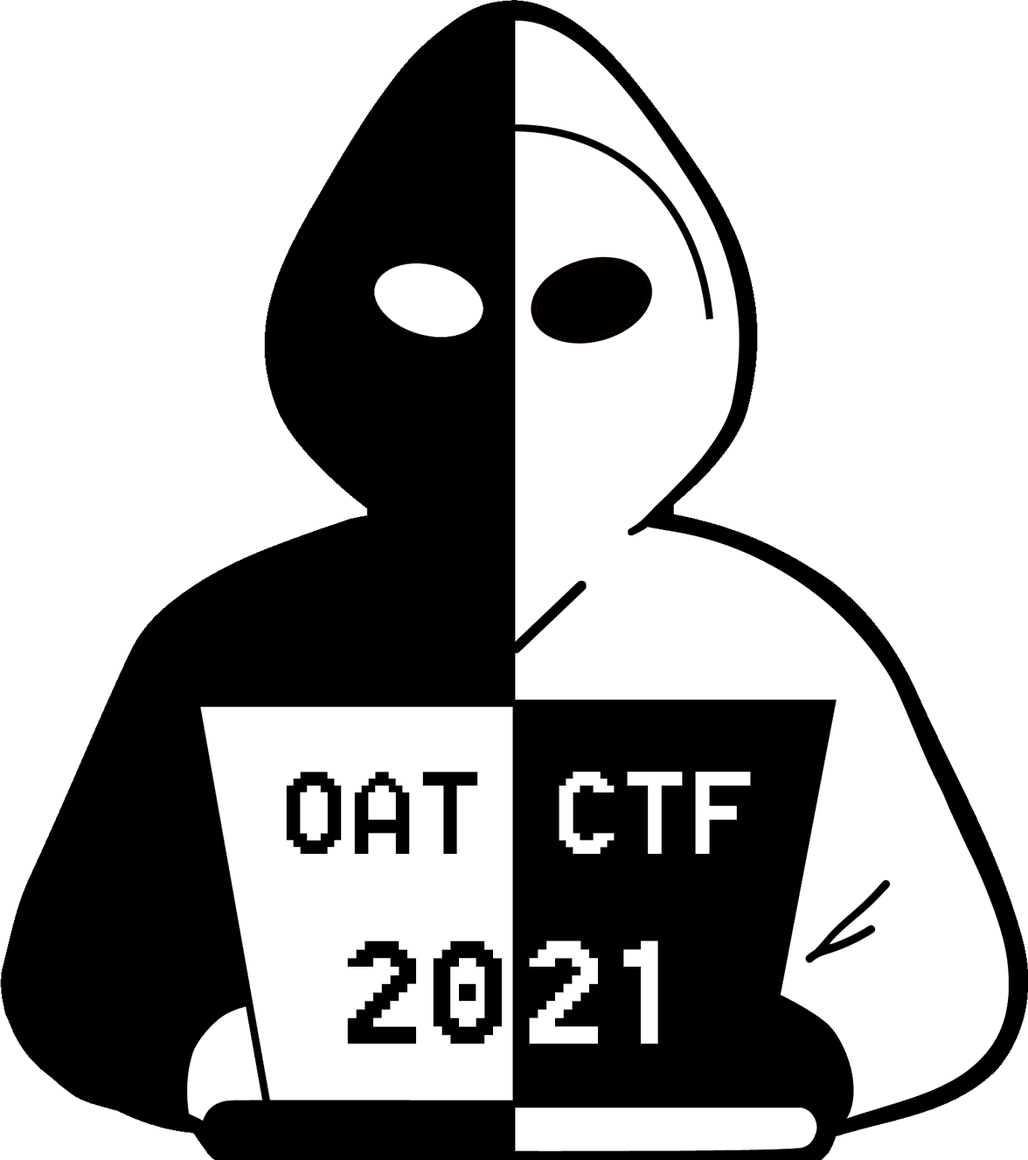
<style>
.page{position:relative;width:1028px;height:1160px;background:#ffffff}
.page>*{position:absolute;margin:0}
.t1{font:145.7px "Terminal";color:#000000}
.t2{font:145.7px "Terminal";color:#ffffff}
.t3{font:182.2px "Terminal";color:#000000}
.t4{font:182.2px "Terminal";color:#ffffff}
</style>
<div class="page">
<p class="t1" style="left:286px;top:771px;width:192px;height:82px">OAT</p>
<p class="t2" style="left:559px;top:771px;width:192px;height:82px">CTF</p>
<p class="t3" style="left:347px;top:940px;width:155px;height:103px">20</p>
<p class="t4" style="left:529px;top:940px;width:129px;height:103px">21</p>
</div>
